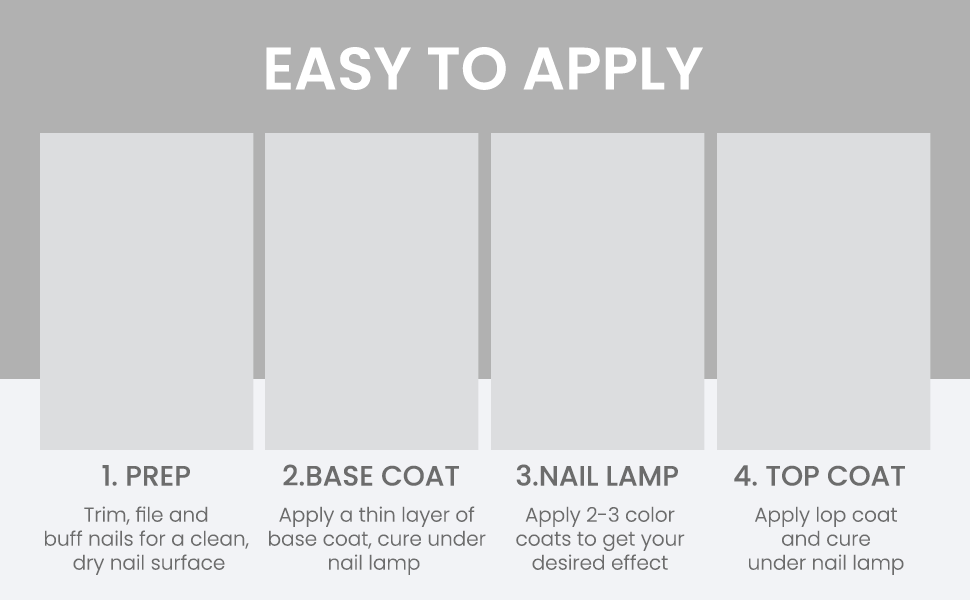
<style>
.page{position:relative;width:970px;height:600px;background:#dcdddf}
.page>*{position:absolute;margin:0}
.t1{font:60px "Poppins-SemiBold";color:#ffffff;text-transform:uppercase}
.t2{font:28px "Poppins-Medium";color:#6c6c6c;text-transform:uppercase}
.t3{font:20px "Poppins-Light";color:#6c6c6c}
</style>
<div class="page">
<p class="t1" style="left:266px;top:47px;width:437px;height:43px">Easy to Apply</p>
<p class="t2" style="left:102px;top:465px;width:88px;height:21px">1. PREP</p>
<p class="t2" style="left:283px;top:464px;width:176px;height:22px">2.BASE COAT</p>
<p class="t2" style="left:516px;top:464px;width:162px;height:22px">3.nail lamp</p>
<p class="t2" style="left:734px;top:465px;width:171px;height:21px">4. TOP COAT</p>
<p class="t3" style="left:45px;top:506px;width:204px;height:69px;text-align:center">Trim, file and <br>buff nails for a clean, <br>dry nail surface</p>
<p class="t3" style="left:269px;top:506px;width:217px;height:69px;text-align:center">Apply a thin layer of<br> base coat, cure under<br>nail lamp</p>
<p class="t3" style="left:516px;top:506px;width:169px;height:64px;text-align:center">Apply 2-3 color<br>coats to get your<br>desired effect</p>
<p class="t3" style="left:749px;top:506px;width:155px;height:69px;text-align:center">Apply lop coat<br>and cure<br>under nail lamp</p>
</div>
